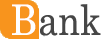
<style>
.page{position:relative;width:103px;height:39px;background:#ffffff}
.page>*{position:absolute;margin:0}
.t1{font:42px "Century";color:#ffffff;scale:0.85 1}
.t2{font:42px "Century";color:#464646;scale:0.85 1}
</style>
<div class="page">
<p class="t1" style="left:12px;top:4px;width:24px;height:31px">B</p>
<p class="t2" style="left:40px;top:4px;width:61px;height:32px"><span class="t1">   </span>ank</p>
</div>
